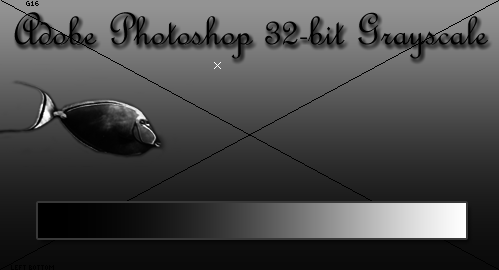
<style>
.page{position:relative;width:499px;height:270px}
.page>*{position:absolute;margin:0}
.t1{font:48px "FrenchScriptMT";color:#000000}
</style>
<div class="page">
<p class="t1" style="left:14px;top:12px;width:474px;height:47px">Adobe Photoshop 32-bit Grayscale</p>
</div>
